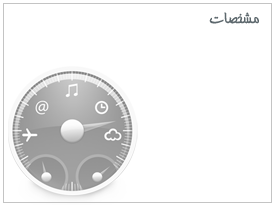
<style>
.page{position:relative;width:275px;height:205px;background:#ffffff}
.page>*{position:absolute;margin:0}
.t1{font:18px "BTabassom";color:#5d686d;font-weight:bold}
</style>
<div class="page">
<p class="t1" style="left:209px;top:12px;width:50px;height:12px">ﺕﺎﺼﺨﺸﻣ</p>
</div>
